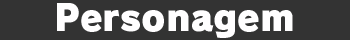
<style>
.page{position:relative;width:350px;height:40px;background:#333333}
.page>*{position:absolute;margin:0}
.t1{font:36px "RodinPro-UB";letter-spacing:-0.002em;color:#fffeff}
</style>
<div class="page">
<p class="t1" style="left:57px;top:3px;width:236px;height:35px">Personagem</p>
</div>
